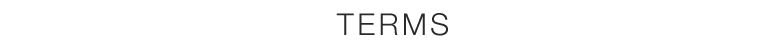
<style>
.page{position:relative;width:784px;height:47px;background:#ffffff}
.page>*{position:absolute;margin:0}
.t1{font:30px "HelveticaNeue-Light";letter-spacing:0.11em;color:#2a2a2a}
</style>
<div class="page">
<p class="t1" style="left:336px;top:13px;width:112px;height:23px">TERMS</p>
</div>
